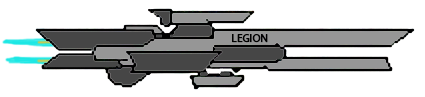
<style>
.page{position:relative;width:425px;height:97px;background:#ffffff}
.page>*{position:absolute;margin:0}
.t1{font:11.4px "MyriadPro-Regular";letter-spacing:0.001em;color:#000000;font-weight:bold;scale:0.94 1}
</style>
<div class="page">
<p class="t1" style="left:232px;top:34px;width:36px;height:9px">LEGION</p>
</div>
